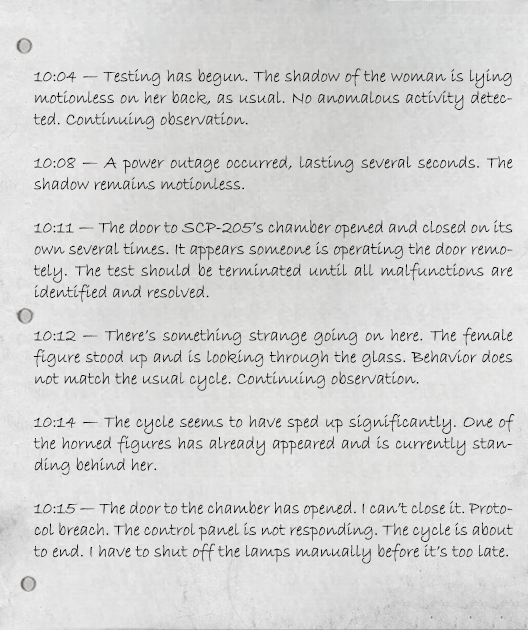
<style>
.page{position:relative;width:528px;height:630px}
.page>*{position:absolute;margin:0}
.t1{font:18px "BradleyHandITC";color:#000000}
</style>
<div class="page">
<p class="t1" style="left:33px;top:68px;width:482px;height:496px;text-align:justify">10:04 — Testing has begun. The shadow of the woman is lying motionless on her back, as usual. No anomalous activity detected. Continuing observation.<br><br>10:08 — A power outage occurred, lasting several seconds. The shadow remains motionless.<br><br>10:11 — The door to SCP-205’s chamber opened and closed on its own several times. It appears someone is operating the door remotely. The test should be terminated until all malfunctions are identified and resolved.<br><br>10:12 — There’s something strange going on here. The female figure stood up and is looking through the glass. Behavior does not match the usual cycle. Continuing observation.<br><br>10:14 — The cycle seems to have sped up significantly. One of the horned figures has already appeared and is currently standing behind her.<br><br>10:15 — The door to the chamber has opened. I can’t close it. Protocol breach. The control panel is not responding. The cycle is about to end. I have to shut off the lamps manually before it’s too late.</p>
</div>
